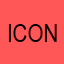
<style>
.page{position:relative;width:64px;height:64px;background:#ff5757}
.page>*{position:absolute;margin:0}
.t1{font:25px "ArialNarrow";color:#000000;font-variant:small-caps}
</style>
<div class="page">
<p class="t1" style="left:8px;top:24px;width:49px;height:18px">ICON</p>
</div>
